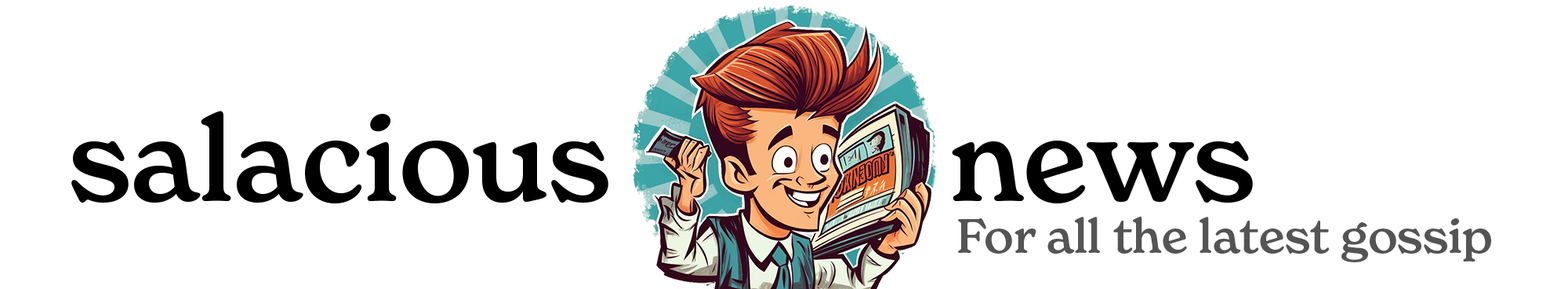
<style>
.page{position:relative;width:1568px;height:289px;background:#ffffff}
.page>*{position:absolute;margin:0}
.t1{font:117.6px "NewSpirit-Medium";color:#000000}
.t2{font:47px "NewSpirit-Medium";color:#545454}
</style>
<div class="page">
<p class="t1" style="left:71px;top:111px;width:537px;height:93px">salacious</p>
<p class="t1" style="left:952px;top:140px;width:301px;height:63px">news</p>
<p class="t2" style="left:958px;top:216px;width:533px;height:46px">For all the latest gossip</p>
</div>
